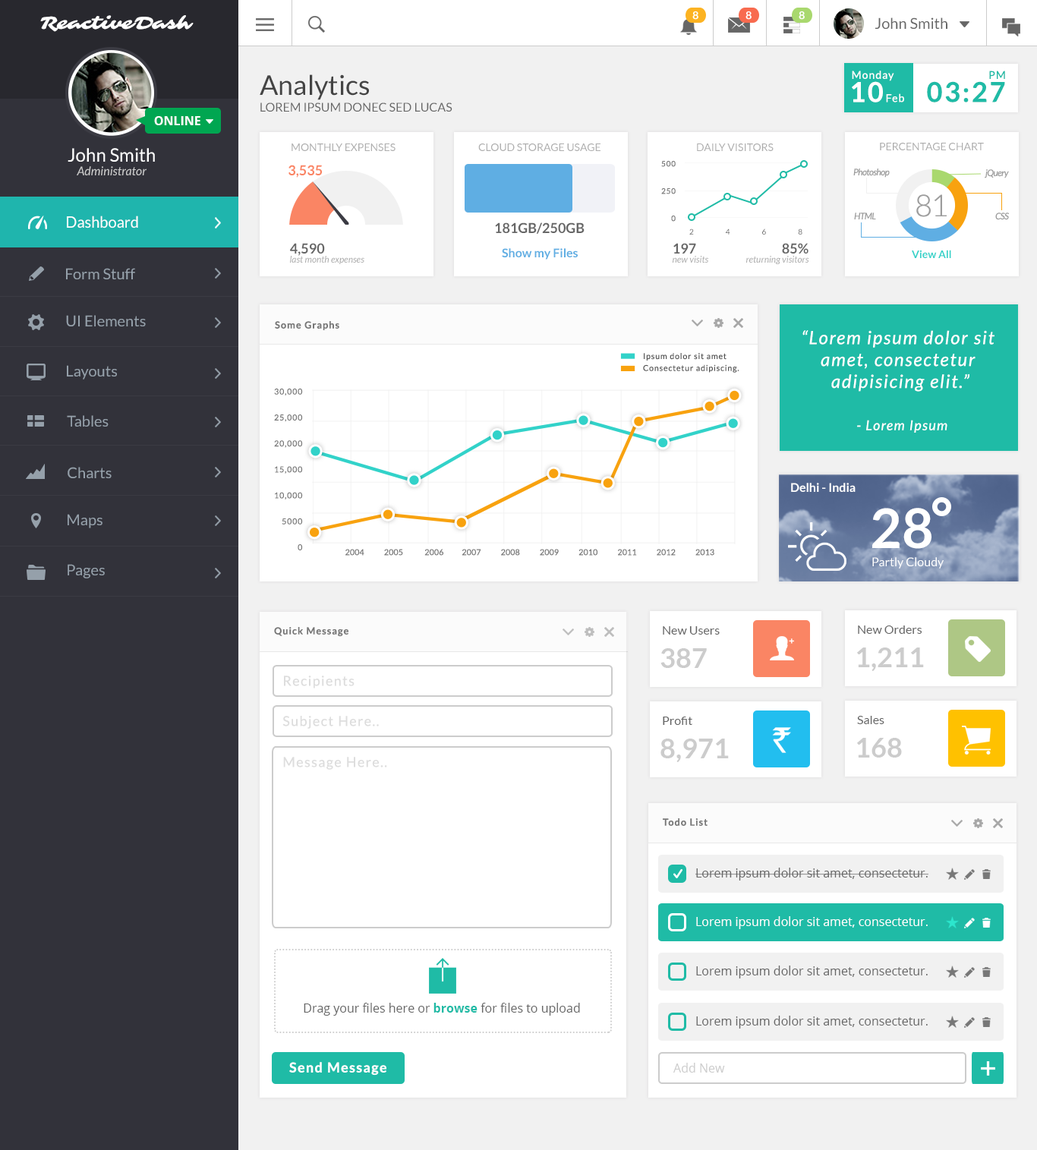
<style>
.page{position:relative;width:1037px;height:1150px;background:#ffffff}
.page>*{position:absolute;margin:0}
.t1{font:18.2px "Sarina-Regular";color:#ffffff}
.t2{font:15.2px "Lato-Regular";color:#666666}
.t3{font:27.3px "Lato-Regular";color:#444444}
.t4{font:10.6px "Lato-Regular";letter-spacing:0.075em;color:#ffffff}
.t5{font:10.6px "Lato-Regular";letter-spacing:0.075em;color:#1fbba6}
.t6{font:27.3px "Lato-Bold";letter-spacing:0.075em;color:#ffffff}
.t7{font:27.3px "Lato-Bold";letter-spacing:0.075em;color:#1fbba6}
.t8{font:12.1px "Lato-Regular";color:#666666;text-transform:uppercase}
.t9{font:12.1px "OpenSans-Bold";color:#ffffff;text-transform:uppercase}
.t10{font:18.2px "Lato-Regular";color:#ffffff}
.t11{font:10.6px "Lato-Regular";color:#aeaeae;text-transform:uppercase}
.t12{font:7.6px/27.3px "Lato-Regular";letter-spacing:0.075em;color:#777777}
.t13{font:12.1px "Lato-Italic";color:#cccccc}
.t14{font:13.7px "Lato-Bold";color:#fa8564;text-transform:uppercase}
.t15{font:9.1px "Lato-Italic";letter-spacing:-0.05em;color:#9d9d9d}
.t16{font:30.4px "Lato-Light";letter-spacing:-0.05em;color:#9d9d9d}
.t17{font:15.2px "Lato-Regular";color:#ffffff}
.t18{font:15.9px "Lato-Regular";color:#ffffff;scale:0.96 1}
.t19{font:13.7px "Lato-Bold";color:#666666;text-transform:uppercase}
.t20{font:7.6px "Lato-Regular";letter-spacing:2em;color:#666666}
.t21{font:9.1px "Lato-Italic";color:#aaaaaa}
.t22{font:12.1px "Lato-Bold";color:#5faee3}
.t23{font:10.6px "Lato-Bold";color:#32d2c9}
.t24{font:15.2px "Lato-Regular";color:#95a0aa}
.t25{font:9.7px "Lato-Bold";letter-spacing:0.075em;color:#777777}
.t26{font:18.2px "Lato-Italic";letter-spacing:0.075em;color:#ffffff}
.t27{font:8.1px "Lato-Regular";letter-spacing:0.075em;color:#555555}
.t28{font:8.1px/26px "Lato-Regular";letter-spacing:0.075em;color:#777777}
.t29{font:13.7px "Lato-Italic";letter-spacing:0.075em;color:#ffffff}
.t30{font:12.1px "Lato-Bold";color:#ffffff}
.t31{font:54.7px "Lato-Bold";color:#ffffff}
.t32{font:8.1px "Lato-Regular";letter-spacing:0.01em;color:#777777}
.t33{font:12.1px "Lato-Regular";color:#ffffff}
.t34{font:12.1px "Lato-Regular";color:#666666}
.t35{font:27.3px "Lato-Bold";color:#cccccc}
.t36{font:13.7px "Lato-Regular";letter-spacing:0.075em;color:#dddddd}
.t37{font:12.1px "OpenSans";color:#666666}
.t38{font:12.1px "OpenSans";color:#ffffff}
.t39{font:12.1px "OpenSans-Bold";color:#1fbba6}
.t40{font:13.7px "Lato-Bold";letter-spacing:0.075em;color:#ffffff}
.t41{font:12.1px "OpenSans";color:#cccccc}
</style>
<div class="page">
<p class="t1" style="left:40px;top:15px;width:154px;height:17px">ReactiveDash</p>
<p class="t2" style="left:874px;top:17px;width:73px;height:12px">John Smith</p>
<p class="t3" style="left:260px;top:74px;width:109px;height:26px">Analytics</p>
<p class="t4" style="left:852px;top:71px;width:42px;height:10px">Monday</p>
<p class="t5" style="left:989px;top:71px;width:16px;height:8px">PM</p>
<p class="t6" style="left:852px;top:81px;width:31px;height:21px">10</p>
<p class="t7" style="left:927px;top:81px;width:78px;height:21px">03:27</p>
<p class="t4" style="left:886px;top:93px;width:18px;height:9px">Feb</p>
<p class="t8" style="left:260px;top:102px;width:192px;height:10px">Lorem Ipsum donec sed lucas</p>
<p class="t9" style="left:154px;top:116px;width:46px;height:9px">Online</p>
<p class="t10" style="left:68px;top:148px;width:87px;height:14px">John Smith</p>
<p class="t11" style="left:291px;top:143px;width:104px;height:8px">Monthly Expenses</p>
<p class="t11" style="left:478px;top:143px;width:122px;height:8px">Cloud Storage Usage</p>
<p class="t11" style="left:697px;top:143px;width:76px;height:8px">Daily Visitors</p>
<p class="t11" style="left:880px;top:143px;width:104px;height:7px">Percentage Chart</p>
<p class="t12" style="left:661px;top:161px;width:15px;height:61px;text-align:right">500<br>250<br>0</p>
<p class="t13" style="left:77px;top:166px;width:70px;height:9px">Administrator</p>
<p class="t14" style="left:288px;top:165px;width:34px;height:13px">3,535</p>
<p class="t15" style="left:853px;top:169px;width:37px;height:9px">Photoshop</p>
<p class="t15" style="left:985px;top:169px;width:24px;height:9px">jQuery</p>
<p class="t16" style="left:916px;top:194px;width:31px;height:23px">81</p>
<p class="t17" style="left:67px;top:216px;width:71px;height:12px">Dashboard</p>
<p class="t18" style="left:67px;top:216px;width:71px;height:12px">Dashboard</p>
<p class="t15" style="left:854px;top:213px;width:22px;height:6px">HTML</p>
<p class="t15" style="left:995px;top:213px;width:14px;height:7px">CSS</p>
<p class="t19" style="left:495px;top:222px;width:89px;height:12px">181GB/250GB</p>
<p class="t20" style="left:689px;top:228px;width:113px;height:7px">2 4 6 8</p>
<p class="t19" style="left:290px;top:243px;width:35px;height:13px">4,590</p>
<p class="t19" style="left:673px;top:243px;width:23px;height:11px">197</p>
<p class="t19" style="left:782px;top:243px;width:26px;height:11px">85%</p>
<p class="t21" style="left:290px;top:256px;width:74px;height:8px">last month expenses</p>
<p class="t22" style="left:502px;top:248px;width:76px;height:12px">Show my Files</p>
<p class="t21" style="left:673px;top:256px;width:35px;height:7px">new visits</p>
<p class="t21" style="left:746px;top:256px;width:63px;height:8px">returning visitors</p>
<p class="t23" style="left:912px;top:250px;width:39px;height:8px">View All</p>
<p class="t24" style="left:66px;top:268px;width:69px;height:11px">Form Stuff</p>
<p class="t24" style="left:66px;top:315px;width:80px;height:11px">UI Elements</p>
<p class="t25" style="left:275px;top:321px;width:64px;height:9px">Some Graphs</p>
<p class="t26" style="left:802px;top:330px;width:192px;height:62px;text-align:center">“Lorem ipsum dolor sit <br>amet, consectetur <br>adipisicing elit.”</p>
<p class="t27" style="left:644px;top:353px;width:82px;height:8px">Ipsum dolor sit amet</p>
<p class="t24" style="left:67px;top:365px;width:50px;height:15px">Layouts</p>
<p class="t27" style="left:643px;top:364px;width:96px;height:9px">Consectetur adipiscing.</p>
<p class="t28" style="left:274px;top:388px;width:29px;height:162px;text-align:right">30,000<br>25,000<br>20,000<br>15,000<br>10,000<br>5000<br>0</p>
<p class="t24" style="left:67px;top:415px;width:42px;height:12px">Tables</p>
<p class="t29" style="left:857px;top:420px;width:90px;height:13px">- Lorem Ipsum</p>
<p class="t24" style="left:68px;top:467px;width:44px;height:11px">Charts</p>
<p class="t30" style="left:791px;top:483px;width:64px;height:9px">Delhi - India</p>
<p class="t31" style="left:872px;top:508px;width:59px;height:41px">28</p>
<p class="t24" style="left:68px;top:514px;width:34px;height:14px">Maps</p>
<p class="t32" style="left:345px;top:549px;width:369px;height:7px">2004  2005   2006  2007  2008  2009  2010  2011  2012  2013</p>
<p class="t33" style="left:872px;top:557px;width:72px;height:12px">Partly Cloudy</p>
<p class="t24" style="left:68px;top:564px;width:37px;height:14px">Pages</p>
<p class="t25" style="left:274px;top:627px;width:74px;height:10px">Quick Message</p>
<p class="t34" style="left:663px;top:626px;width:57px;height:9px">New Users</p>
<p class="t34" style="left:858px;top:625px;width:64px;height:9px">New Orders</p>
<p class="t35" style="left:660px;top:648px;width:47px;height:20px">387</p>
<p class="t35" style="left:857px;top:647px;width:67px;height:24px">1,211</p>
<p class="t36" style="left:284px;top:676px;width:70px;height:12px">Recipients</p>
<p class="t36" style="left:282px;top:716px;width:97px;height:13px">Subject Here..</p>
<p class="t34" style="left:663px;top:717px;width:29px;height:8px">Profit</p>
<p class="t34" style="left:857px;top:716px;width:27px;height:8px">Sales</p>
<p class="t35" style="left:857px;top:738px;width:45px;height:20px">168</p>
<p class="t35" style="left:660px;top:739px;width:69px;height:23px">8,971</p>
<p class="t36" style="left:283px;top:757px;width:104px;height:13px">Message Here..</p>
<p class="t25" style="left:663px;top:818px;width:44px;height:8px">Todo List</p>
<p class="t37" style="left:695px;top:868px;width:233px;height:13px">Lorem ipsum dolor sit amet, consectetur.</p>
<p class="t38" style="left:696px;top:916px;width:232px;height:13px">Lorem ipsum dolor sit amet, consectetur.</p>
<p class="t37" style="left:696px;top:966px;width:232px;height:12px">Lorem ipsum dolor sit amet, consectetur.</p>
<p class="t37" style="left:304px;top:1003px;width:276px;height:13px">Drag your files here or <span class="t39">browse</span> for files to upload</p>
<p class="t37" style="left:696px;top:1016px;width:232px;height:13px">Lorem ipsum dolor sit amet, consectetur.</p>
<p class="t40" style="left:289px;top:1062px;width:97px;height:14px">Send Message</p>
<p class="t41" style="left:673px;top:1063px;width:52px;height:10px">Add New</p>
</div>
